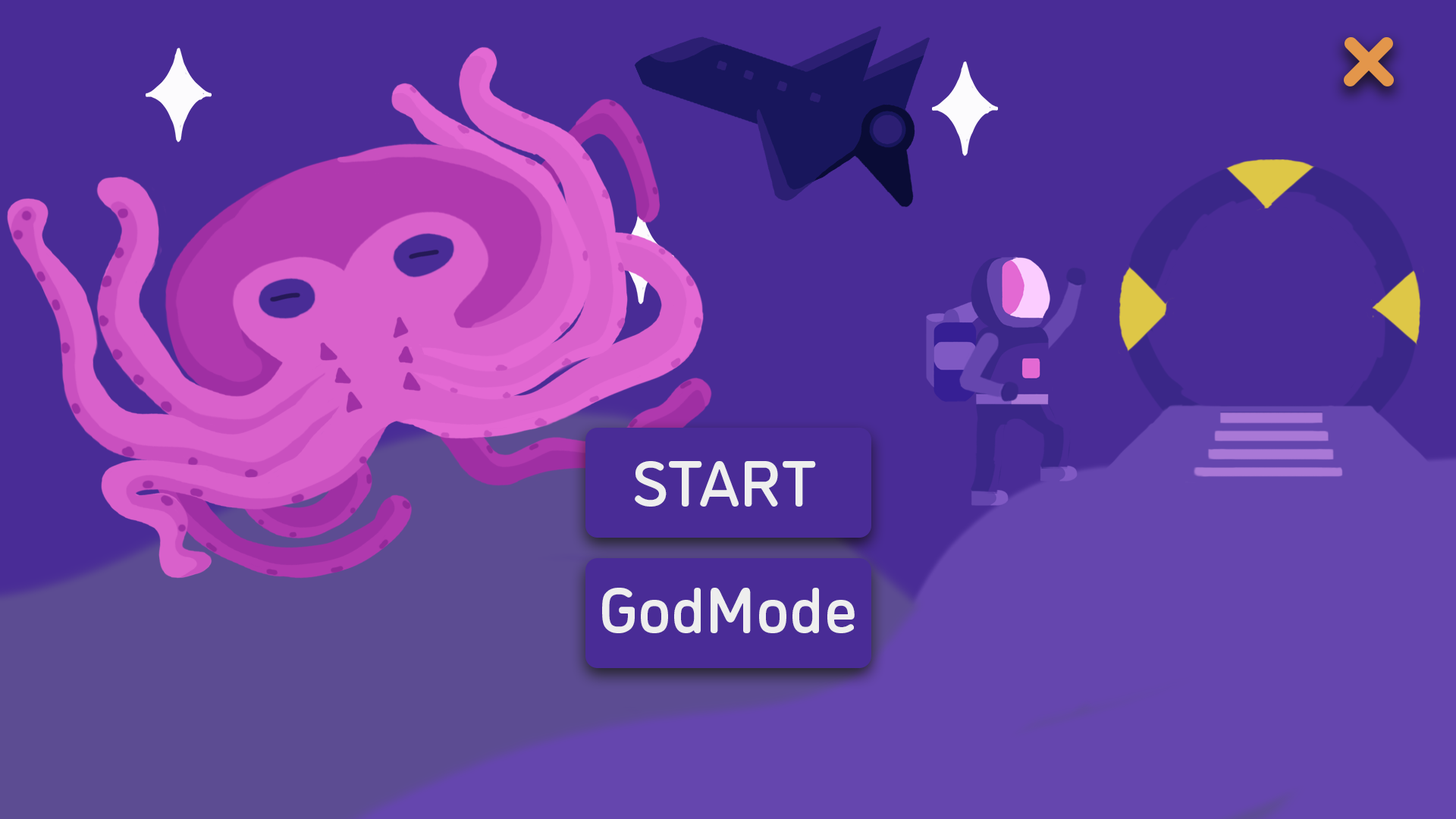
<style>
.page{position:relative;width:1456px;height:819px;background:#492c96}
.page>*{position:absolute;margin:0}
.t1{font:65.4px "DINosaur-Medium";color:#eeeeee}
</style>
<div class="page">
<p class="t1" style="left:635px;top:461px;width:181px;height:46px">START</p>
<p class="t1" style="left:602px;top:588px;width:253px;height:45px">GodMode</p>
</div>
